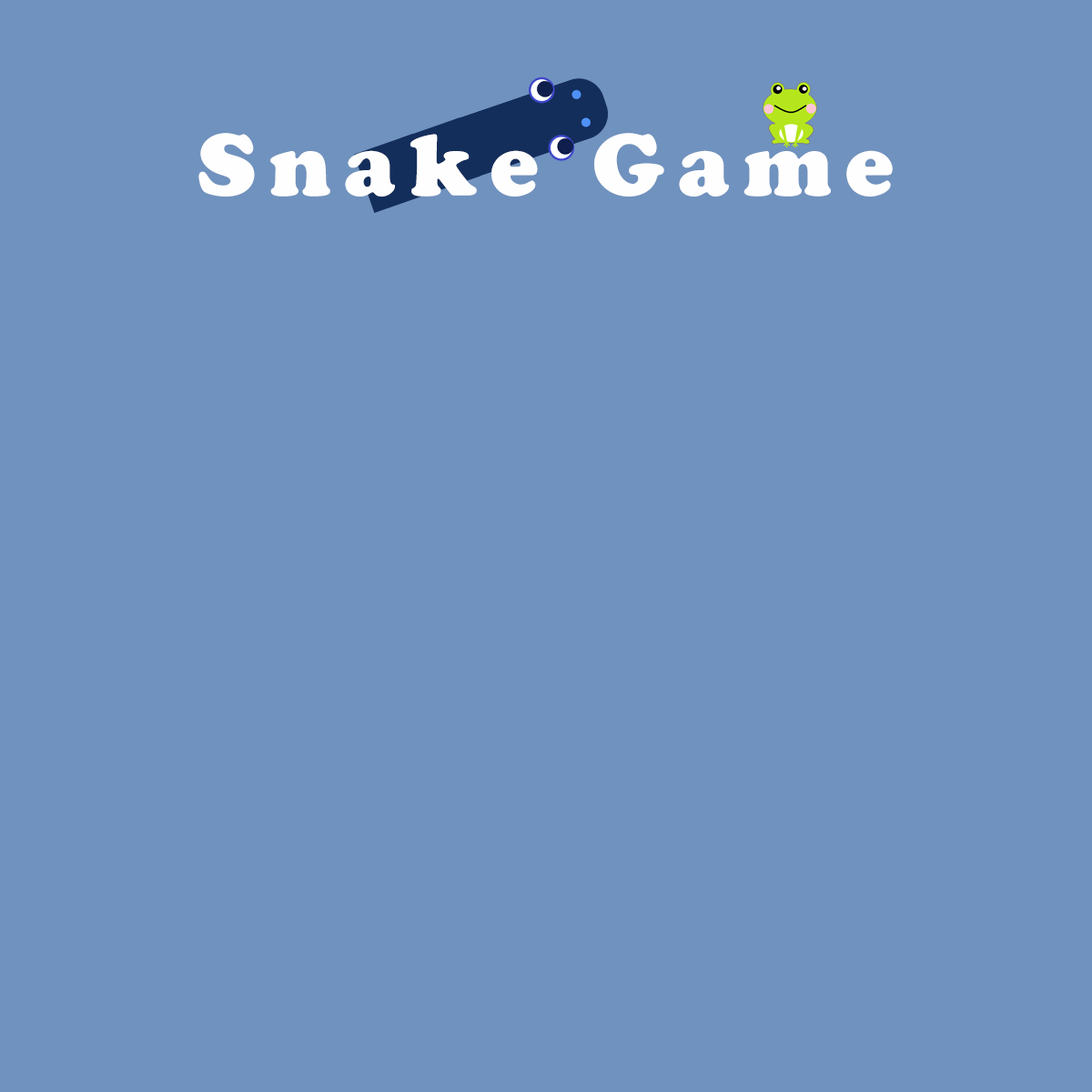
<style>
.page{position:relative;width:1092px;height:1092px;background:#7092be}
.page>*{position:absolute;margin:0}
.t1{font:87.4px "CooperBlackStd";letter-spacing:0.15em;color:#fefefe}
</style>
<div class="page">
<p class="t1" style="left:198px;top:133px;width:695px;height:64px">Snake Game</p>
</div>
